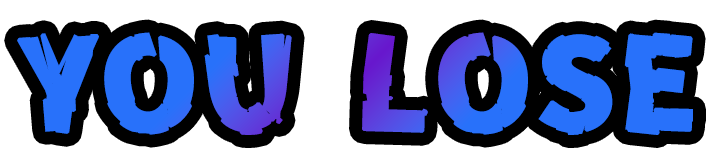
<style>
.page{position:relative;width:712px;height:156px;background:#ffffff}
.page>*{position:absolute;margin:0}
.t1{font:125px "ZeroGothic";color:#2871fa;font-weight:bold}
.t2{font:125px "ZeroGothic";font-weight:bold}
</style>
<div class="page">
<p class="t1" style="left:17px;top:32px;width:275px;height:103px">YOU</p>
<p class="t2" style="left:362px;top:32px;width:331px;height:103px">LOSE</p>
</div>
